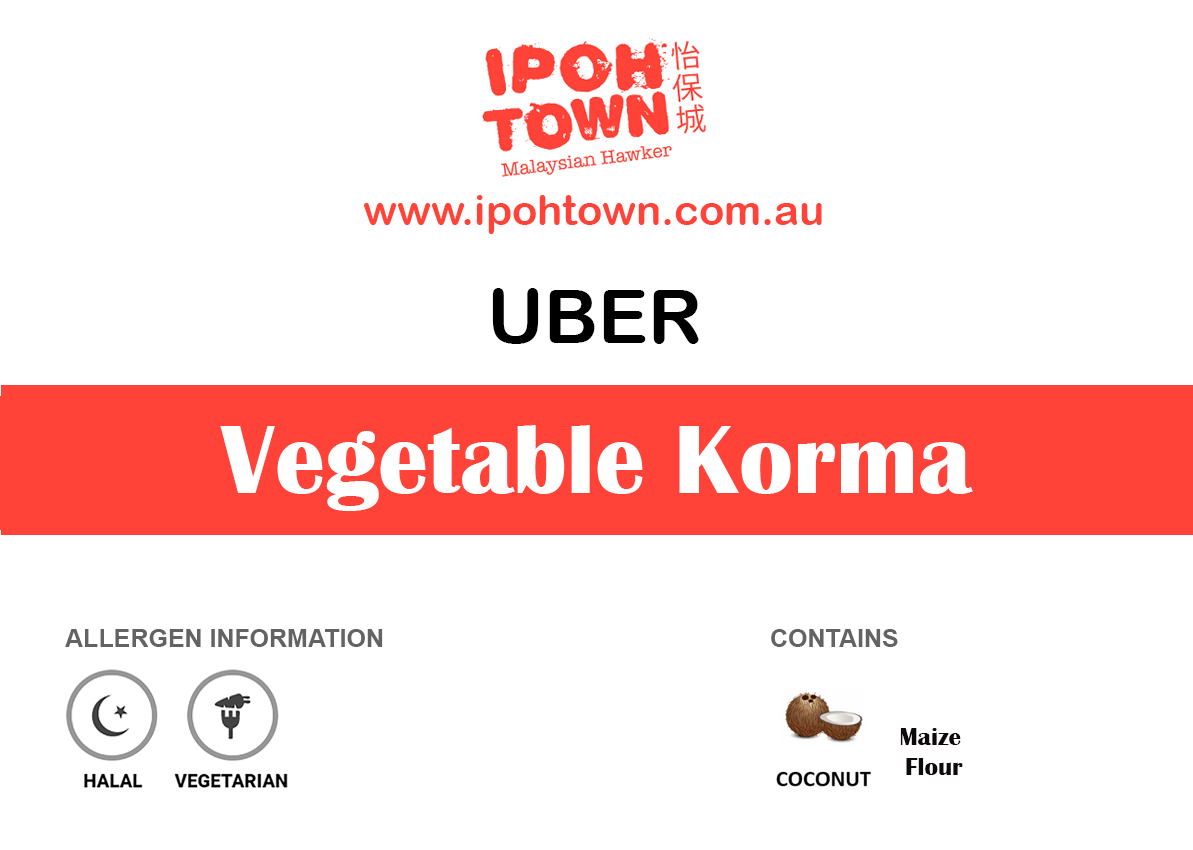
<style>
.page{position:relative;width:1193px;height:850px;background:#ffffff}
.page>*{position:absolute;margin:0}
.t1{font:41.7px "ArialRoundedMTBold";color:#ff4338}
.t2{font:75px "ArialRoundedMTBold";color:#000000}
.t3{font:100px "BritannicBold";color:#ffffff}
.t4{font:25px "Arial-BoldMT";color:#636363}
.t5{font:25px "BritannicBold";color:#0e0a0b}
</style>
<div class="page">
<p class="t1" style="left:364px;top:195px;width:458px;height:39px">www.ipohtown.com.au</p>
<p class="t2" style="left:492px;top:288px;width:207px;height:56px">UBER</p>
<p class="t3" style="left:220px;top:425px;width:753px;height:86px">Vegetable Korma</p>
<p class="t4" style="left:65px;top:629px;width:318px;height:18px">ALLERGEN INFORMATION</p>
<p class="t4" style="left:771px;top:629px;width:127px;height:18px">CONTAINS</p>
<p class="t5" style="left:900px;top:728px;width:63px;height:47px;text-align:center">Maize <br>Flour</p>
</div>
